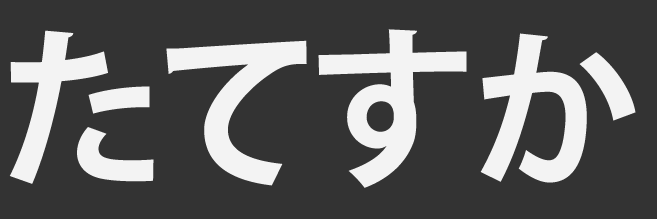
<style>
.page{position:relative;width:657px;height:219px;background:#333333}
.page>*{position:absolute;margin:0}
.t1{font:170px "KozGoPr6N-Bold";letter-spacing:-0.01em;color:#f3f3f3}
</style>
<div class="page">
<p class="t1" style="left:9px;top:29px;width:627px;height:159px">たてすか</p>
</div>
